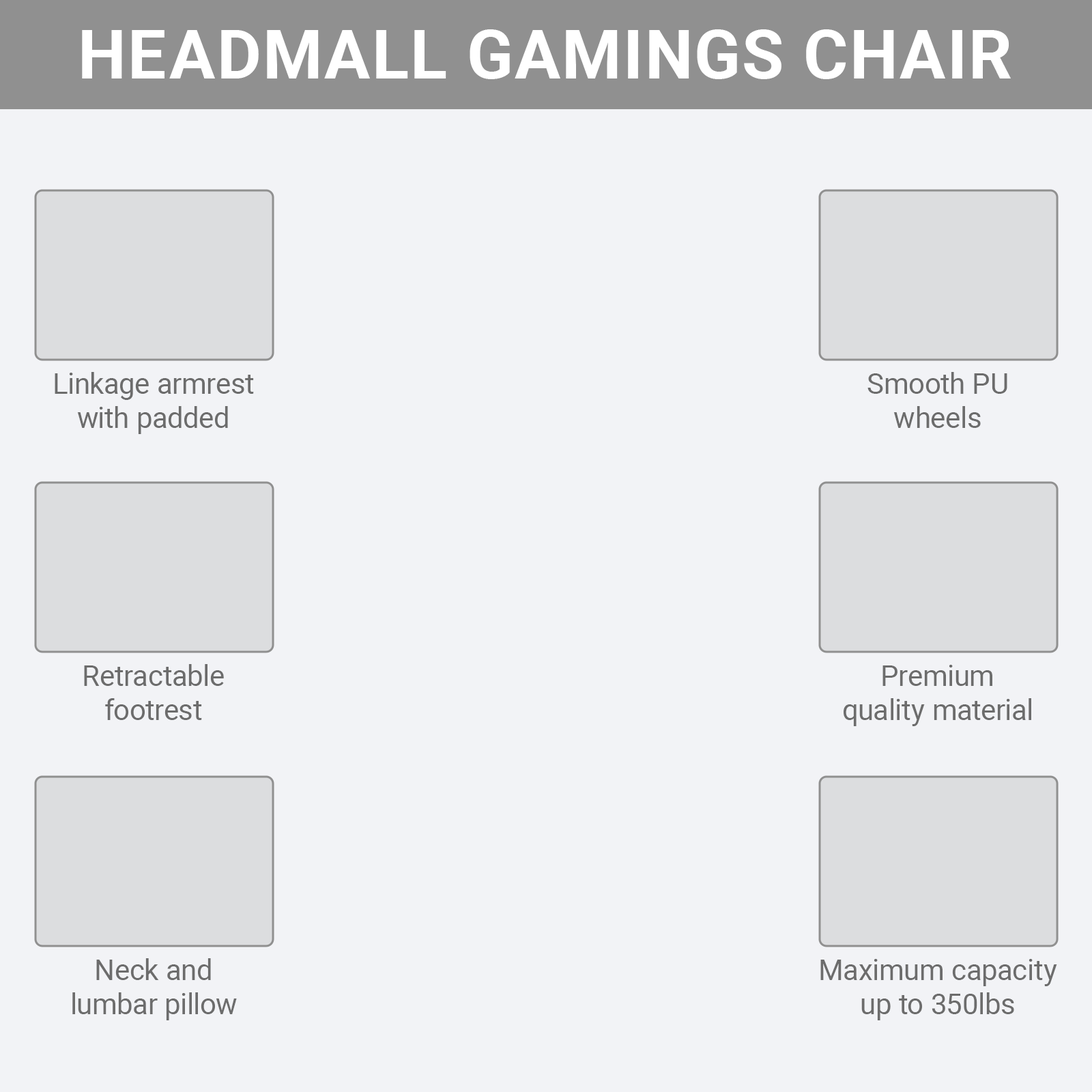
<style>
.page{position:relative;width:1092px;height:1092px;background:#f2f3f6}
.page>*{position:absolute;margin:0}
.t1{font:68.2px "Roboto-Bold";color:#ffffff;text-transform:uppercase}
.t2{font:28.7px "Roboto-Regular";color:#6c6c6c}
</style>
<div class="page">
<p class="t1" style="left:82px;top:29px;width:929px;height:50px">Headmall gamings chair</p>
<p class="t2" style="left:55px;top:372px;width:199px;height:62px;text-align:center">Linkage armrest<br>with padded</p>
<p class="t2" style="left:867px;top:372px;width:140px;height:56px;text-align:center">Smooth PU<br>wheels</p>
<p class="t2" style="left:84px;top:664px;width:140px;height:56px;text-align:center">Retractable<br>footrest</p>
<p class="t2" style="left:844px;top:665px;width:187px;height:61px;text-align:center">Premium<br>quality material</p>
<p class="t2" style="left:72px;top:958px;width:165px;height:62px;text-align:center">Neck and<br>lumbar pillow</p>
<p class="t2" style="left:820px;top:959px;width:237px;height:61px;text-align:center">Maximum capacity<br>up to 350lbs</p>
</div>
